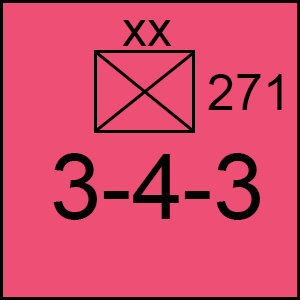
<style>
.page{position:relative;width:300px;height:300px;background:#ee4f74}
.page>*{position:absolute;margin:0}
.t1{font:50px "ArialMT";color:#000000}
.t2{font:91.7px "ArialMT";color:#000000}
</style>
<div class="page">
<p class="t1" style="left:122px;top:20px;width:50px;height:26px">xx</p>
<p class="t1" style="left:208px;top:74px;width:74px;height:36px">271</p>
<p class="t2" style="left:53px;top:153px;width:207px;height:67px">3-4-3</p>
</div>
